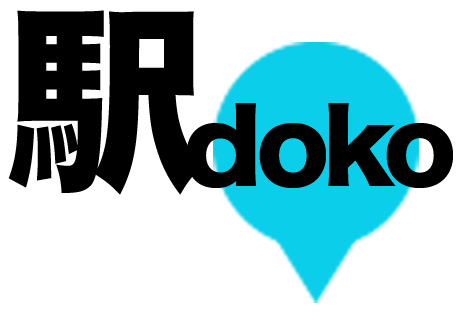
<style>
.page{position:relative;width:460px;height:315px;background:#ffffff}
.page>*{position:absolute;margin:0}
.t1{font:200px "HiraKakuStd-W8";letter-spacing:-0.08em;color:#000000}
.t2{font:100.4px "HiraKakuStd-W8";letter-spacing:-0.08em;color:#000000}
</style>
<div class="page">
<p class="t1" style="left:8px;top:10px;width:195px;height:185px">駅</p>
<p class="t2" style="left:186px;top:103px;width:267px;height:85px">doko</p>
</div>
